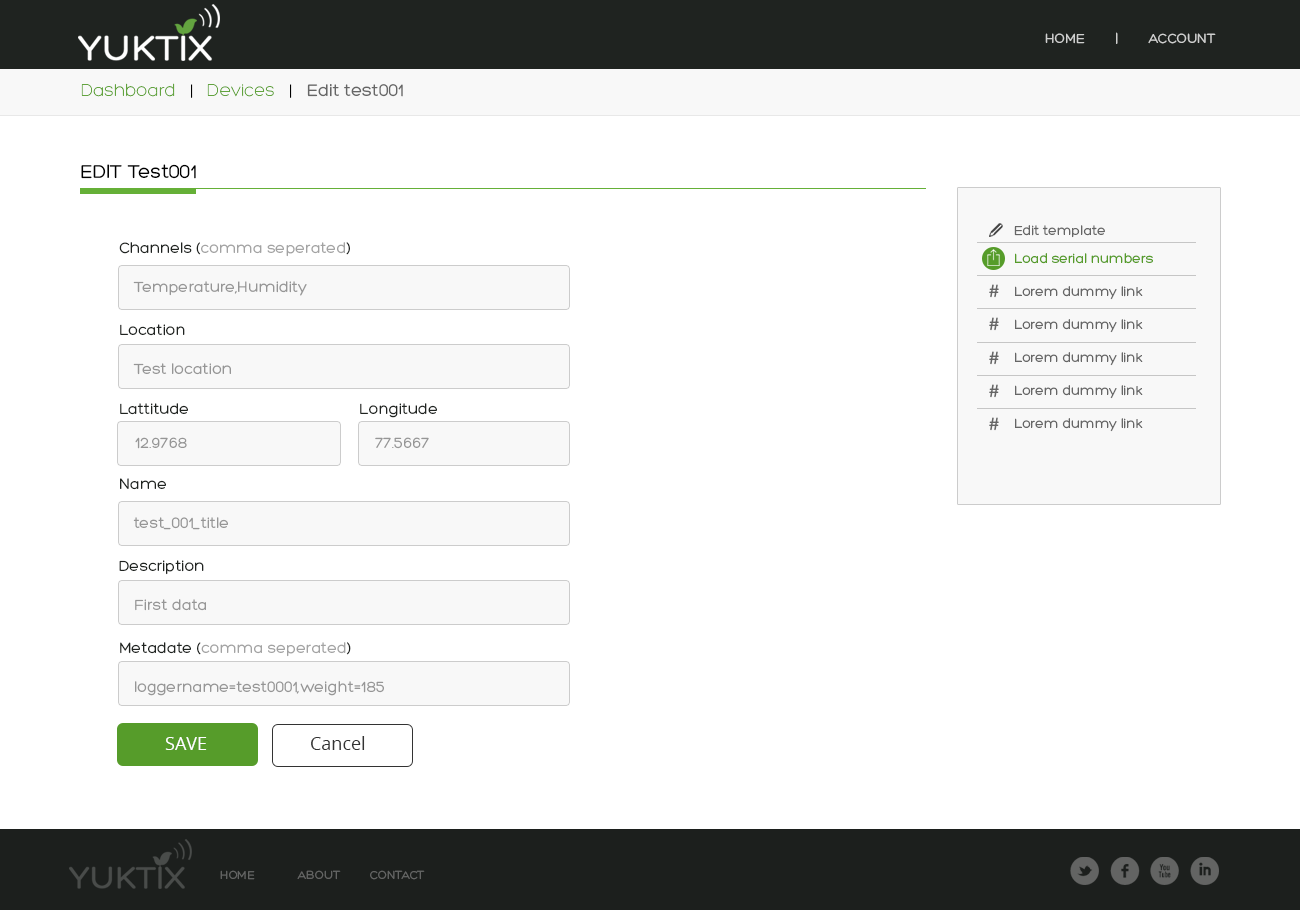
<style>
.page{position:relative;width:1300px;height:910px;background:#ffffff}
.page>*{position:absolute;margin:0}
.t1{font:14px "Hero";color:#cecfce;text-transform:uppercase}
.t2{font:18px "Hero";color:#666666}
.t3{font:18px "Hero-Light";color:#63a43f}
.t4{font:18px "Hero-Light";color:#000000}
.t5{font:20px "Hero";color:#000000}
.t6{font:20px "Hero";color:#000000;text-transform:uppercase}
.t7{font:14px "Hero";color:#666666}
.t8{font:16px/41px "Hero";color:#a3a3a3}
.t9{font:16px/41px "Hero";color:#1f2320}
.t10{font:14px/33px "Hero";color:#666666}
.t11{font:14px/33px "Hero";color:#569c2a}
.t12{font:16px/41px "Hero";color:#969696}
.t13{font:20px "Hero";color:#666666}
.t14{font:16px "Hero";color:#1f2320}
.t15{font:16px "Hero";color:#969696}
.t16{font:18px "OpenSans";color:#ffffff}
.t17{font:18px "OpenSans";color:#333333}
.t18{font:40.5px "Socialico";letter-spacing:0.2em;color:#636463}
.t19{font:12.2px "Hero";color:#636463;text-transform:uppercase}
</style>
<div class="page">
<p class="t1" style="left:1045px;top:32px;width:171px;height:12px">home        |        Account</p>
<p class="t2" style="left:81px;top:83px;width:322px;height:15px"><span class="t3">Dashboard</span><span class="t4">   |   </span><span class="t3">Devices   </span><span class="t4">|   </span>Edit test001</p>
<p class="t5" style="left:81px;top:164px;width:115px;height:15px"><span class="t6">edit </span>Test001</p>
<p class="t7" style="left:1014px;top:225px;width:91px;height:13px">Edit template</p>
<p class="t8" style="left:119px;top:242px;width:231px;height:94px"><span class="t9">Channels (</span>comma seperated<span class="t9">)<br><br>Location</span></p>
<p class="t10" style="left:1015px;top:253px;width:138px;height:179px"><span class="t11">Load serial numbers<br></span>Lorem dummy link<br>Lorem dummy link<br>Lorem dummy link<br>Lorem dummy link<br>Lorem dummy link</p>
<p class="t12" style="left:133px;top:281px;width:174px;height:94px">Temperature,Humidity<br><br>Test location</p>
<p class="t13" style="left:989px;top:284px;width:10px;height:14px">#</p>
<p class="t13" style="left:989px;top:317px;width:10px;height:14px">#</p>
<p class="t13" style="left:989px;top:351px;width:10px;height:14px">#</p>
<p class="t13" style="left:989px;top:384px;width:10px;height:14px">#</p>
<p class="t14" style="left:120px;top:403px;width:317px;height:15px">Lattitude                                       Longitude</p>
<p class="t13" style="left:989px;top:417px;width:10px;height:14px">#</p>
<p class="t15" style="left:135px;top:437px;width:294px;height:12px">12.9768                                           77.5667</p>
<p class="t9" style="left:119px;top:478px;width:232px;height:179px">Name<br><br>Description<br><br>Metadate (<span class="t8">comma seperated</span>)</p>
<p class="t12" style="left:133px;top:517px;width:251px;height:179px">test_001_title<br><br>First data <br><br>loggername=test0001,weight=185</p>
<p class="t16" style="left:165px;top:737px;width:42px;height:13px">SAVE</p>
<p class="t17" style="left:311px;top:736px;width:54px;height:14px">Cancel</p>
<p class="t18" style="left:1070px;top:857px;width:149px;height:28px">lfxi</p>
<p class="t19" style="left:220px;top:870px;width:205px;height:10px">home             About         Contact</p>
</div>
